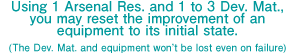
<style>
.page{position:relative;width:297px;height:53px;background:#ffffff}
.page>*{position:absolute;margin:0}
.t1{font:14px/12px "FutoGoB101Pr5-Bold";color:#00999c}
.t2{font:10px/16px "FutoGoB101Pr5-Bold";color:#00999c}
</style>
<div class="page">
<p class="t1" style="left:9px;top:0px;width:277px;height:53px;text-align:center">Using 1 Arsenal Res. and 1 to 3 Dev. Mat.,<br>you may reset the improvement of an<br>equipment to its initial state.<br><span class="t2">(The Dev. Mat. and equipment won’t be lost even on failure)</span></p>
</div>
